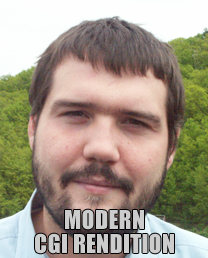
<style>
.page{position:relative;width:208px;height:258px}
.page>*{position:absolute;margin:0}
.t1{font:24px/23.6px "Impact";letter-spacing:0.01em;color:#cccccc}
</style>
<div class="page">
<p class="t1" style="left:35px;top:209px;width:139px;height:45px;text-align:center">MODERN<br>CGI RENDITION</p>
</div>
